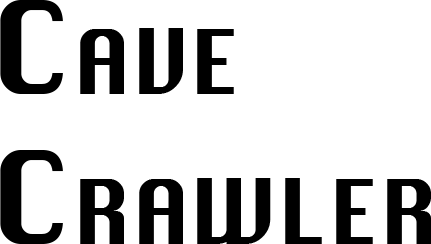
<style>
.page{position:relative;width:431px;height:244px;background:#ffffff}
.page>*{position:absolute;margin:0}
.t1{font:125px "Silom";color:#000000;font-variant:small-caps}
</style>
<div class="page">
<p class="t1" style="left:0px;top:0px;width:431px;height:244px">Cave <br>Crawler</p>
</div>
